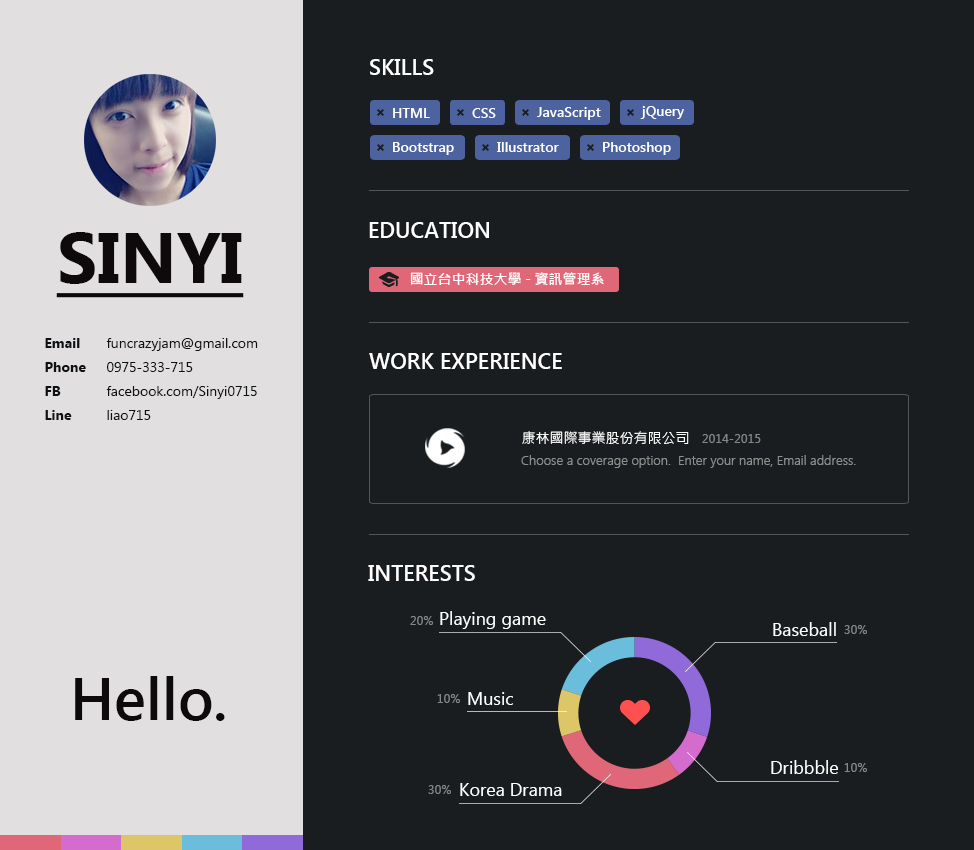
<style>
.page{position:relative;width:974px;height:850px;background:#191d20}
.page>*{position:absolute;margin:0}
.t1{font:22px "SegoeUI-SemiBold";color:#ffffff}
.t2{font:14px "SegoeUI-SemiBold";color:#ffffff}
.t3{font:72px "SegoeUI-Bold";color:#0e0a0b;text-decoration:underline}
.t4{font:14px "MicrosoftJhengHeiBold";color:#ffffff}
.t5{font:14px/24px "SegoeUI-Bold";color:#0d1114}
.t6{font:14px/24px "SegoeUI";color:#0d1114}
.t7{font:14px "MicrosoftJhengHeiRegular";color:#fefefe}
.t8{font:12px "SegoeUI";letter-spacing:0.025em;color:#888787}
.t9{font:13px "SegoeUI-Semilight";color:#8e8e8e}
.t10{font:18px "SegoeUI";color:#ffffff}
.t11{font:60px "SegoeUI-SemiBold";color:#0e0a0b}
</style>
<div class="page">
<p class="t1" style="left:370px;top:59px;width:64px;height:16px">SKILLS</p>
<p class="t2" style="left:393px;top:108px;width:37px;height:10px">HTML</p>
<p class="t2" style="left:472px;top:108px;width:24px;height:10px">CSS</p>
<p class="t2" style="left:537px;top:107px;width:64px;height:13px">JavaScript</p>
<p class="t2" style="left:640px;top:106px;width:44px;height:13px">jQuery</p>
<p class="t2" style="left:393px;top:142px;width:61px;height:13px">Bootstrap</p>
<p class="t2" style="left:497px;top:142px;width:62px;height:10px">Illustrator</p>
<p class="t2" style="left:603px;top:142px;width:68px;height:13px">Photoshop</p>
<p class="t1" style="left:369px;top:222px;width:120px;height:16px">EDUCATION</p>
<p class="t3" style="left:56px;top:232px;width:188px;height:66px">SINYI</p>
<p class="t4" style="left:410px;top:272px;width:194px;height:13px">國立台中科技大學 - 資訊管理系</p>
<p class="t5" style="left:45px;top:338px;width:41px;height:82px">Email<br>Phone<br>FB<br>Line</p>
<p class="t6" style="left:106px;top:338px;width:152px;height:82px">funcrazyjam@gmail.com<br>0975-333-715<br>facebook.com/Sinyi0715<br>liao715</p>
<p class="t1" style="left:369px;top:353px;width:193px;height:16px">WORK EXPERIENCE</p>
<p class="t7" style="left:522px;top:431px;width:167px;height:13px">康林國際事業股份有限公司</p>
<p class="t8" style="left:702px;top:434px;width:59px;height:9px">2014-2015</p>
<p class="t9" style="left:521px;top:455px;width:335px;height:13px">Choose a coverage option.  Enter your name, Email address.</p>
<p class="t1" style="left:368px;top:565px;width:107px;height:16px">INTERESTS</p>
<p class="t8" style="left:410px;top:616px;width:23px;height:9px">20%</p>
<p class="t10" style="left:440px;top:611px;width:106px;height:18px">Playing game</p>
<p class="t10" style="left:773px;top:622px;width:63px;height:14px">Baseball</p>
<p class="t8" style="left:844px;top:625px;width:23px;height:9px">30%</p>
<p class="t11" style="left:75px;top:676px;width:150px;height:45px">Hello.</p>
<p class="t8" style="left:437px;top:694px;width:23px;height:9px">10%</p>
<p class="t10" style="left:468px;top:692px;width:45px;height:13px">Music</p>
<p class="t10" style="left:771px;top:760px;width:67px;height:14px">Dribbble</p>
<p class="t8" style="left:844px;top:763px;width:23px;height:9px">10%</p>
<p class="t8" style="left:428px;top:785px;width:23px;height:9px">30%</p>
<p class="t10" style="left:460px;top:783px;width:102px;height:13px">Korea Drama</p>
</div>
